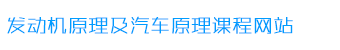
<style>
.page{position:relative;width:340px;height:50px;background:#ffffff}
.page>*{position:absolute;margin:0}
.t1{font:20px "ZHSRXT--GBK1-0";color:#009cff;font-weight:bold}
</style>
<div class="page">
<p class="t1" style="left:7px;top:16px;width:286px;height:18px">发动机原理及汽车原理课程网站</p>
</div>
